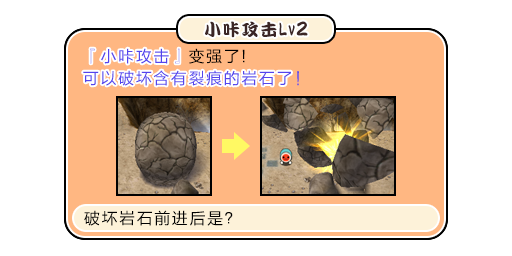
<style>
.page{position:relative;width:512px;height:256px;background:#ffffff}
.page>*{position:absolute;margin:0}
.t1{font:17px "DFPKanTingLiuW9";letter-spacing:0.1em;color:#3b2626}
.t2{font:18.7px "DFPKanTingLiuW9";letter-spacing:0.1em;color:#3b2626;scale:0.59 1}
.t3{font:20.4px "DFPKanTingLiuW9";letter-spacing:0.1em;color:#3b2626;scale:0.83 1}
.t4{font:16px/22px "FZLTHJW--GB1-0";letter-spacing:0.1em;color:#5444ed}
.t5{font:16px/22px "FZLTHJW--GB1-0";letter-spacing:0.1em;color:#000000}
.t6{font:16px "FZLTHJW--GB1-0";letter-spacing:0.1em;color:#000000}
</style>
<div class="page">
<p class="t1" style="left:205px;top:21px;width:103px;height:17px">小咔攻击<span class="t2">Lv</span><span class="t3">2</span></p>
<p class="t4" style="left:83px;top:48px;width:216px;height:38px">『小咔攻击』<span class="t5">变强了!<br></span>可以破坏含有裂痕的岩石了！</p>
<p class="t4" style="left:83px;top:48px;width:208px;height:38px">『小咔攻击』<br>可以破坏含有裂痕的岩石了</p>
<p class="t6" style="left:84px;top:210px;width:149px;height:16px">破坏岩石前进后是？</p>
</div>
